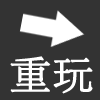
<style>
.page{position:relative;width:100px;height:100px;background:#333333}
.page>*{position:absolute;margin:0}
.t1{font:39.6px "AdobeSongStd-Light";color:#ffffff;font-weight:bold;scale:1.05 1}
</style>
<div class="page">
<p class="t1" style="left:10px;top:56px;width:83px;height:38px">重玩</p>
</div>
